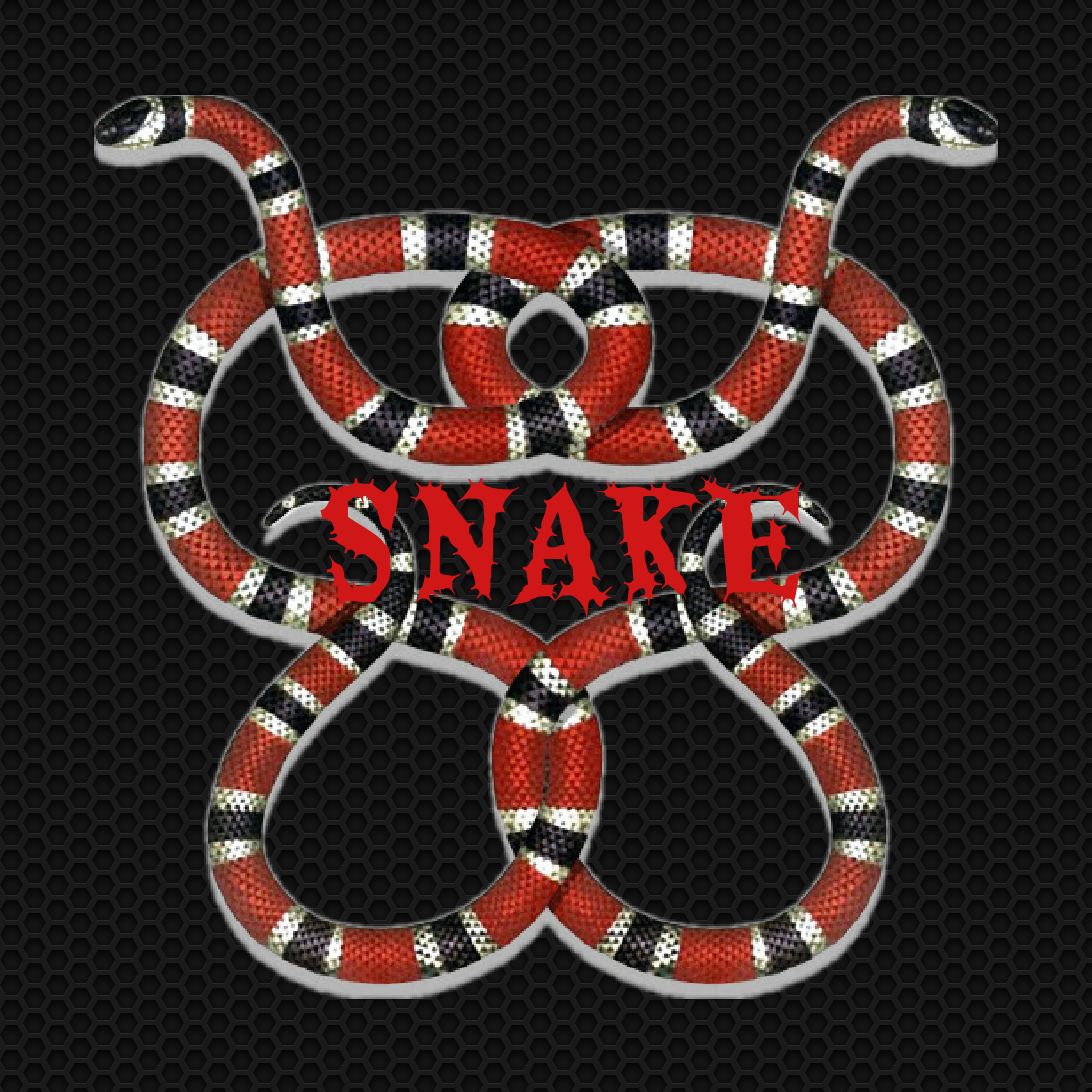
<style>
.page{position:relative;width:1092px;height:1092px;background:#1a1a1a}
.page>*{position:absolute;margin:0}
.t1{font:150px "Eater-Regular";color:#cf1717}
</style>
<div class="page">
<p class="t1" style="left:320px;top:475px;width:485px;height:142px">SNAKE</p>
</div>
